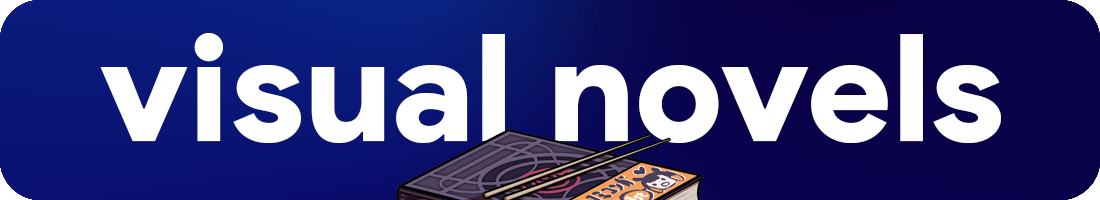
<style>
.page{position:relative;width:1100px;height:200px}
.page>*{position:absolute;margin:0}
.t1{font:150px "ProductSans-Black";color:#ffffff}
</style>
<div class="page">
<p class="t1" style="left:100px;top:33px;width:901px;height:110px">visual novels</p>
</div>
